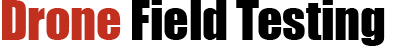
<style>
.page{position:relative;width:394px;height:49px;background:#ffffff}
.page>*{position:absolute;margin:0}
.t1{font:50px "Impact";letter-spacing:-0.005em;color:#000000}
.t2{font:50px "Impact";letter-spacing:-0.005em;color:#c1301f}
</style>
<div class="page">
<p class="t1" style="left:2px;top:0px;width:383px;height:46px"><span class="t2">Drone </span>Field Testing</p>
</div>
